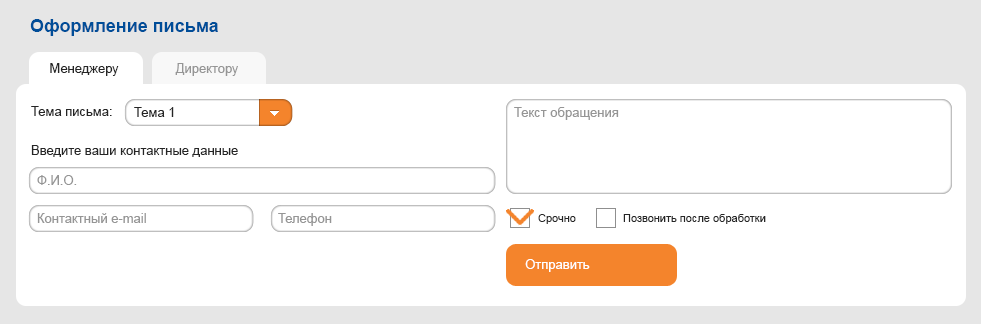
<style>
.page{position:relative;width:981px;height:324px;background:#ffffff}
.page>*{position:absolute;margin:0}
.t1{font:18px "Arial-BoldMT";color:#004d98}
.t2{font:13px "ArialMT";color:#252525}
.t3{font:13px "ArialMT";color:#959595}
.t4{font:11px "ArialMT";color:#252525}
.t5{font:13px "ArialMT";color:#ffffff}
</style>
<div class="page">
<p class="t1" style="left:30px;top:19px;width:188px;height:17px">Оформление письма</p>
<p class="t2" style="left:50px;top:63px;width:69px;height:13px">Менеджеру</p>
<p class="t3" style="left:175px;top:63px;width:63px;height:13px">Директору</p>
<p class="t2" style="left:31px;top:106px;width:81px;height:10px">Тема письма:</p>
<p class="t2" style="left:134px;top:107px;width:40px;height:10px">Тема 1</p>
<p class="t3" style="left:514px;top:107px;width:105px;height:13px">Текст обращения</p>
<p class="t2" style="left:31px;top:145px;width:207px;height:12px">Введите ваши контактные данные</p>
<p class="t3" style="left:37px;top:175px;width:40px;height:10px">Ф.И.О.</p>
<p class="t3" style="left:37px;top:213px;width:109px;height:10px">Контактный e-mail</p>
<p class="t3" style="left:278px;top:213px;width:54px;height:13px">Телефон</p>
<p class="t4" style="left:538px;top:214px;width:38px;height:10px">Срочно</p>
<p class="t4" style="left:623px;top:214px;width:143px;height:10px">Позвонить после обработки</p>
<p class="t5" style="left:525px;top:259px;width:65px;height:13px">Отправить</p>
</div>
